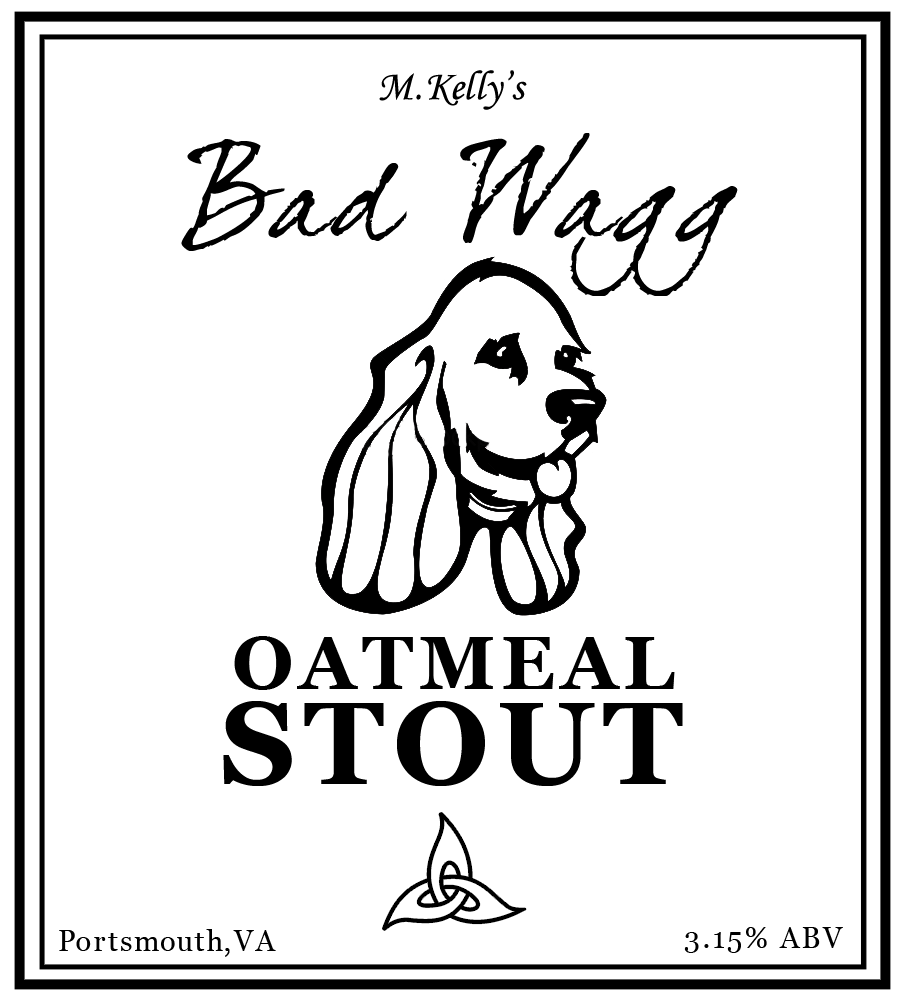
<style>
.page{position:relative;width:900px;height:998px;background:#ffffff}
.page>*{position:absolute;margin:0}
.t1{font:41.7px "MonotypeCorsiva";letter-spacing:0.035em;color:#000000}
.t2{font:41.7px "MonotypeCorsiva";letter-spacing:-0.065em;color:#000000}
.t3{font:41.7px "MonotypeCorsiva";letter-spacing:-0.025em;color:#000000}
.t4{font:41.7px "MonotypeCorsiva";letter-spacing:0.015em;color:#000000}
.t5{font:41.7px "MonotypeCorsiva";letter-spacing:-0.005em;color:#000000}
.t6{font:41.7px "MonotypeCorsiva";letter-spacing:0.075em;color:#000000}
.t7{font:116.7px "DearJoefour";letter-spacing:0.075em;color:#000000}
.t8{font:75px "Georgia-Bold";letter-spacing:0.075em;color:#000000}
.t9{font:116.7px "Georgia-Bold";letter-spacing:0.075em;color:#000000}
.t10{font:29.2px "Georgia";letter-spacing:0.075em;color:#000000}
.t11{font:29.2px "Georgia";letter-spacing:-0.002em;color:#000000}
.t12{font:29.2px "Georgia";letter-spacing:0.055em;color:#000000}
.t13{font:29.2px "Georgia";letter-spacing:-0.005em;color:#000000}
.t14{font:29.2px "Georgia";letter-spacing:0.035em;color:#000000}
.t15{font:29.2px "Georgia";letter-spacing:0.095em;color:#000000}
</style>
<div class="page">
<p class="t1" style="left:379px;top:70px;width:148px;height:40px">M. <span class="t2">K</span><span class="t3">e</span>l<span class="t4">l</span><span class="t3">y</span><span class="t5">’</span><span class="t6">s</span></p>
<p class="t7" style="left:181px;top:133px;width:557px;height:163px">Bad Wagg</p>
<p class="t8" style="left:234px;top:636px;width:441px;height:54px">OATMEAL</p>
<p class="t9" style="left:223px;top:701px;width:460px;height:85px">STOUT</p>
<p class="t10" style="left:59px;top:929px;width:217px;height:28px"><span class="t11">P</span>ort<span class="t12">s</span><span class="t13">m</span><span class="t14">ou</span>t<span class="t13">h</span><span class="t15">,</span>VA</p>
<p class="t10" style="left:684px;top:927px;width:159px;height:26px">3.15% ABV</p>
</div>
